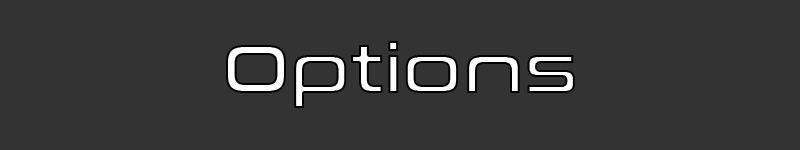
<style>
.page{position:relative;width:800px;height:150px;background:#333333}
.page>*{position:absolute;margin:0}
.t1{font:69.4px "ConthraxSb-Regular"}
</style>
<div class="page">
<p class="t1" style="left:226px;top:41px;width:349px;height:67px">Options</p>
</div>
